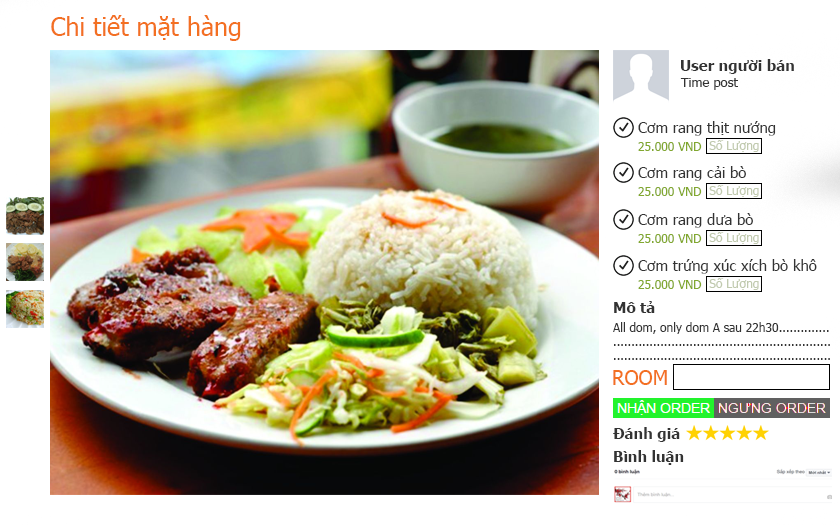
<style>
.page{position:relative;width:840px;height:525px;background:#ffffff}
.page>*{position:absolute;margin:0}
.t1{font:25px "Tahoma";color:#f37022}
.t2{font:15px "Tahoma-Bold";color:#333333}
.t3{font:13px "Tahoma";color:#333333}
.t4{font:15px "Tahoma";color:#333333}
.t5{font:12px "Tahoma";color:#82a830}
.t6{font:12px "Tahoma";color:#c1caaf}
.t7{font:12px "Tahoma";color:#333333}
.t8{font:20px "Tahoma";color:#f37022}
</style>
<div class="page">
<p class="t1" style="left:51px;top:15px;width:190px;height:26px">Chi tiết mặt hàng</p>
<p class="t2" style="left:681px;top:59px;width:113px;height:15px">User người bán</p>
<p class="t3" style="left:680px;top:78px;width:58px;height:12px">Time post</p>
<p class="t4" style="left:638px;top:121px;width:138px;height:15px">Cơm rang thịt nướng</p>
<p class="t5" style="left:638px;top:142px;width:64px;height:9px">25.000 VND</p>
<p class="t6" style="left:709px;top:140px;width:50px;height:12px">Số Lượng</p>
<p class="t4" style="left:638px;top:166px;width:108px;height:15px">Cơm rang cải bò</p>
<p class="t6" style="left:709px;top:185px;width:50px;height:12px">Số Lượng</p>
<p class="t5" style="left:638px;top:187px;width:64px;height:9px">25.000 VND</p>
<p class="t4" style="left:638px;top:213px;width:115px;height:15px">Cơm rang dưa bò</p>
<p class="t6" style="left:709px;top:232px;width:50px;height:12px">Số Lượng</p>
<p class="t5" style="left:638px;top:234px;width:64px;height:9px">25.000 VND</p>
<p class="t4" style="left:638px;top:259px;width:179px;height:15px">Cơm trứng xúc xích bò khô</p>
<p class="t5" style="left:638px;top:280px;width:64px;height:9px">25.000 VND</p>
<p class="t6" style="left:709px;top:278px;width:50px;height:12px">Số Lượng</p>
<p class="t2" style="left:614px;top:301px;width:41px;height:12px">Mô tả</p>
<p class="t7" style="left:613px;top:322px;width:217px;height:38px">All dom, only dom A sau 22h30..............<br>............................................................<br>............................................................</p>
<p class="t8" style="left:613px;top:370px;width:54px;height:15px">ROOM</p>
<p class="t2" style="left:613px;top:427px;width:67px;height:15px">Đánh giá</p>
<p class="t2" style="left:614px;top:450px;width:70px;height:15px">Bình luận</p>
</div>
